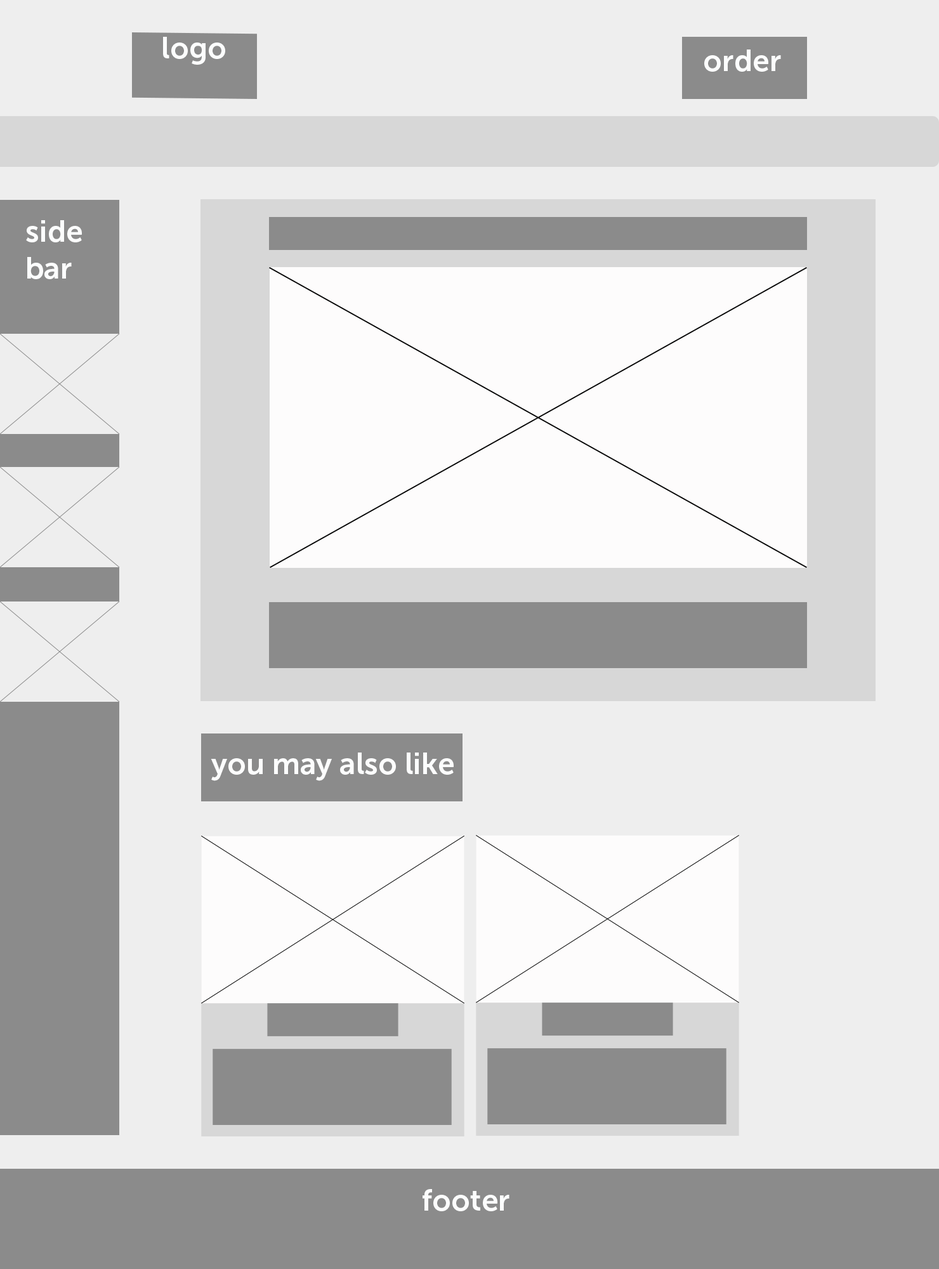
<style>
.page{position:relative;width:939px;height:1269px;background:#eeeeee}
.page>*{position:absolute;margin:0}
.t1{font:30.5px "MuseoSans-700";color:#fcfdfd}
</style>
<div class="page">
<p class="t1" style="left:163px;top:37px;width:62px;height:28px">logo</p>
<p class="t1" style="left:705px;top:50px;width:76px;height:22px">order</p>
<p class="t1" style="left:26px;top:220px;width:56px;height:59px">side<br>bar</p>
<p class="t1" style="left:211px;top:753px;width:243px;height:28px">you may also like</p>
<p class="t1" style="left:423px;top:1189px;width:87px;height:23px">footer</p>
</div>
